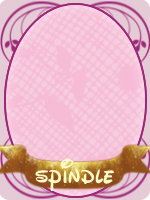
<style>
.page{position:relative;width:150px;height:200px}
.page>*{position:absolute;margin:0}
.t1{font:37.4px "Waltograph";color:#fcfac7}
</style>
<div class="page">
<p class="t1" style="left:35px;top:158px;width:80px;height:33px">spindle</p>
</div>
